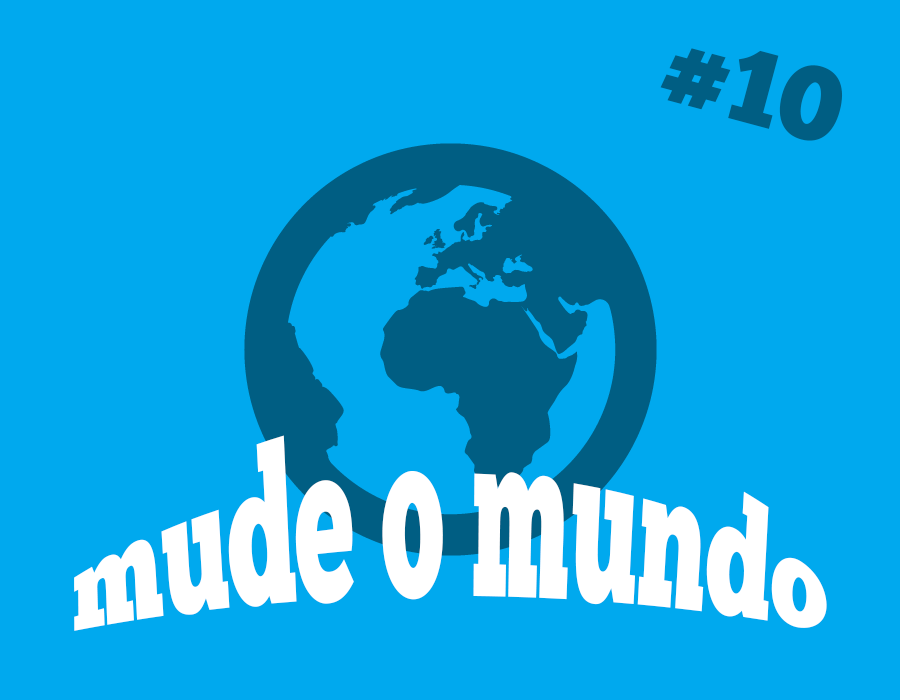
<style>
.page{position:relative;width:900px;height:700px;background:#00a9ee}
.page>*{position:absolute;margin:0}
.t1{font:104.5px "ChunkFive-Roman";color:#005e83}
.t2{font:104.5px/104.5px "ChunkFive-Roman";color:#ffffff}
</style>
<div class="page">
<p class="t1" style="left:660px;top:48px;width:183px;height:93px;rotate:15deg">#10</p>
<p class="t2" style="left:74px;top:435px;width:753px;height:196px;text-align:right">mude o mundo</p>
</div>
